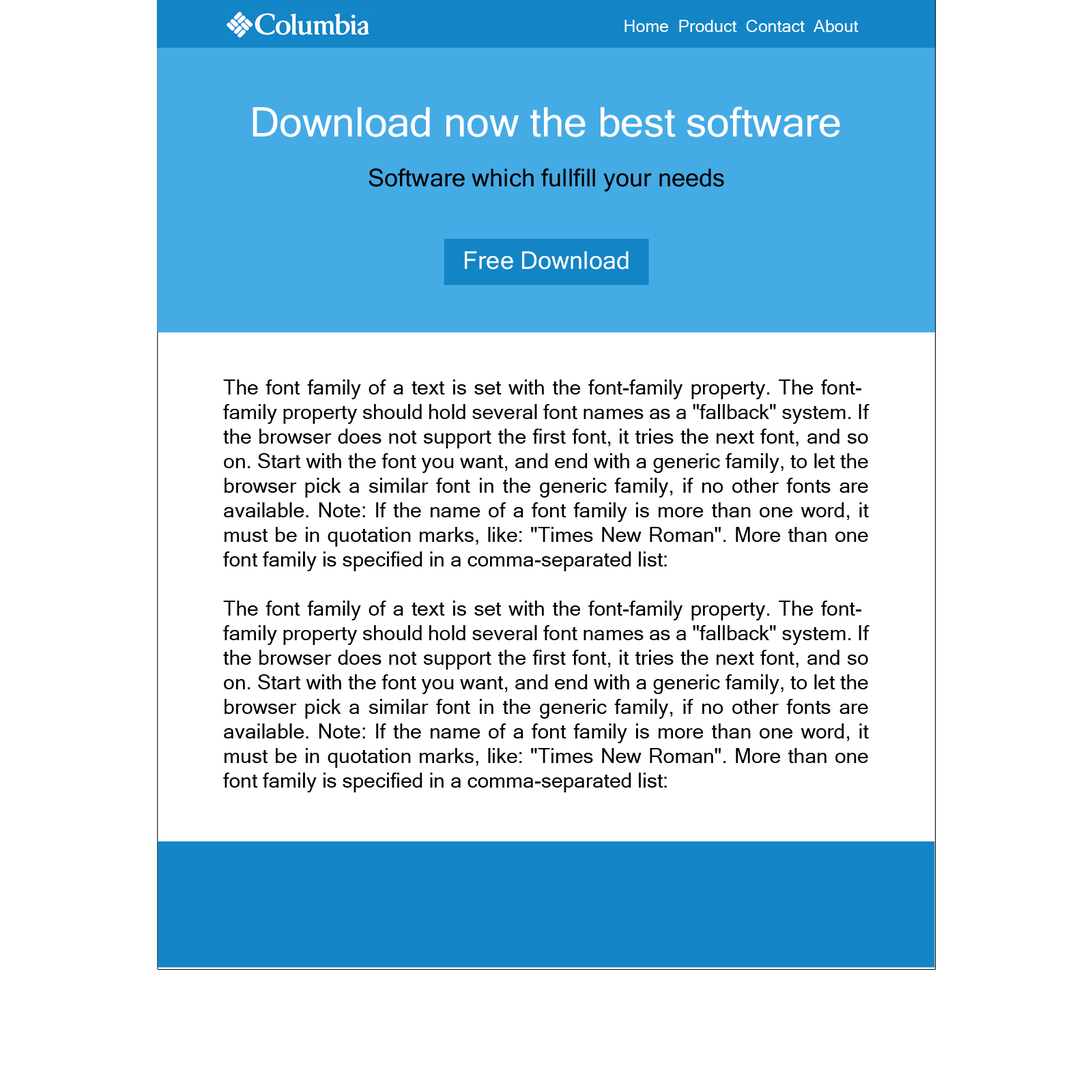
<style>
.page{position:relative;width:1092px;height:1092px;background:#ffffff}
.page>*{position:absolute;margin:0}
.t1{font:17.1px "MicrosoftSansSerif";color:#ffffff}
.t2{font:40.9px "MicrosoftSansSerif";color:#ffffff}
.t3{font:24.6px "MicrosoftSansSerif";color:#000000}
.t4{font:24.6px "MicrosoftSansSerif";color:#ffffff}
.t5{font:20.5px "MicrosoftSansSerif";color:#010101}
</style>
<div class="page">
<p class="t1" style="left:624px;top:20px;width:235px;height:12px">Home  Product  Contact  About</p>
<p class="t2" style="left:253px;top:106px;width:587px;height:31px">Download now the best software</p>
<p class="t3" style="left:369px;top:168px;width:355px;height:24px">Software which fullfill your needs</p>
<p class="t4" style="left:465px;top:251px;width:164px;height:19px">Free Download</p>
<p class="t5" style="left:223px;top:379px;width:646px;height:413px;text-align:justify">The font family of a text is set with the font-family property. The font-family property should hold several font names as a "fallback" system. If the browser does not support the first font, it tries the next font, and so on. Start with the font you want, and end with a generic family, to let the browser pick a similar font in the generic family, if no other fonts are available. Note: If the name of a font family is more than one word, it must be in quotation marks, like: "Times New Roman". More than one font family is specified in a comma-separated list:<br><br>The font family of a text is set with the font-family property. The font-family property should hold several font names as a "fallback" system. If the browser does not support the first font, it tries the next font, and so on. Start with the font you want, and end with a generic family, to let the browser pick a similar font in the generic family, if no other fonts are available. Note: If the name of a font family is more than one word, it must be in quotation marks, like: "Times New Roman". More than one font family is specified in a comma-separated list:</p>
</div>
